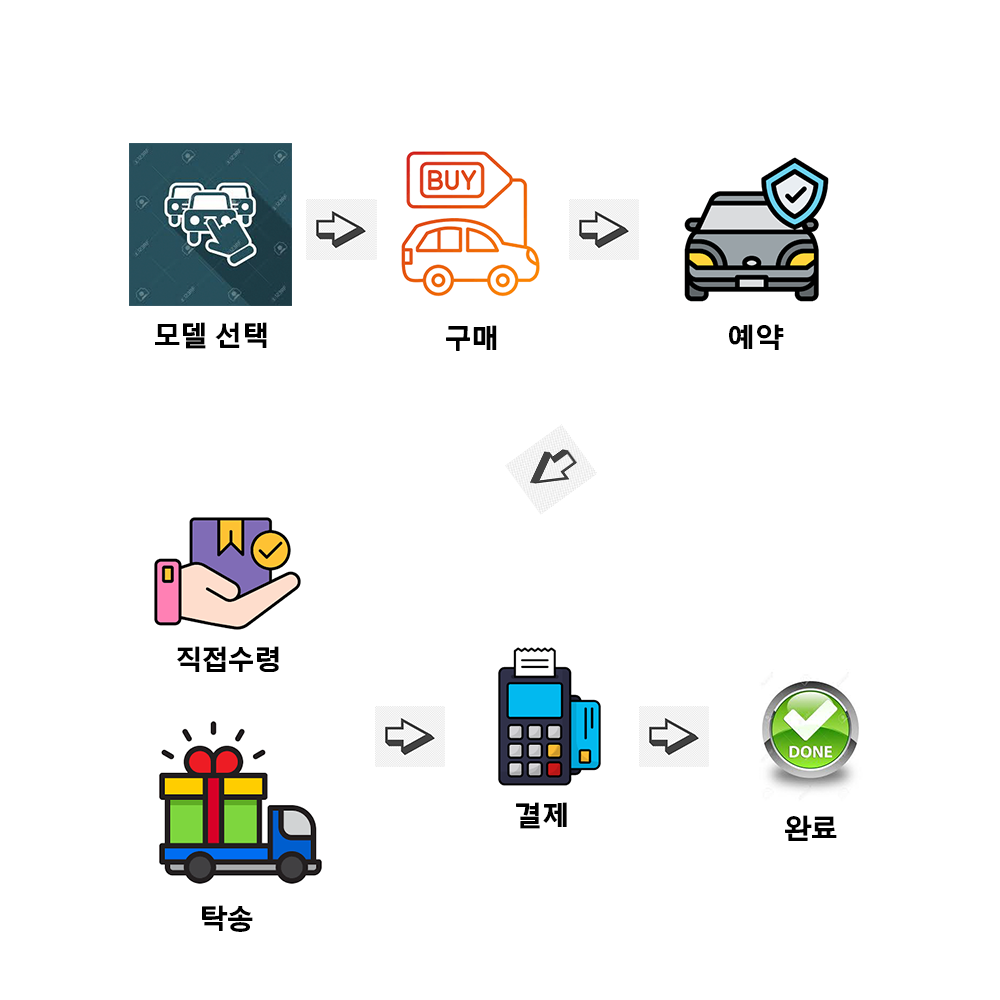
<style>
.page{position:relative;width:1000px;height:1000px;background:#ffffff}
.page>*{position:absolute;margin:0}
.t1{font:29px "Arita-dotum-Bold_OTF";color:#000000}
</style>
<div class="page">
<p class="t1" style="left:155px;top:322px;width:112px;height:27px">모델 선택</p>
<p class="t1" style="left:446px;top:325px;width:51px;height:26px">구매</p>
<p class="t1" style="left:729px;top:324px;width:55px;height:26px">예약</p>
<p class="t1" style="left:177px;top:646px;width:102px;height:26px">직접수령</p>
<p class="t1" style="left:516px;top:802px;width:51px;height:27px">결제</p>
<p class="t1" style="left:785px;top:815px;width:52px;height:26px">완료</p>
<p class="t1" style="left:202px;top:905px;width:51px;height:27px">탁송</p>
</div>
